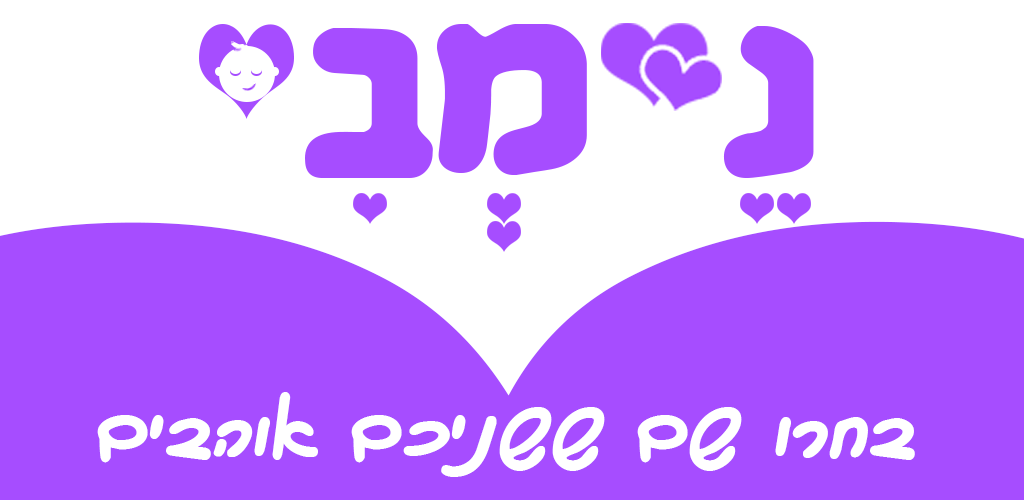
<style>
.page{position:relative;width:1024px;height:500px;background:#a64dff}
.page>*{position:absolute;margin:0}
.t1{font:80px "BN-Sharon-New";color:#ffffff}
</style>
<div class="page">
<p class="t1" style="left:97px;top:392px;width:818px;height:85px">םיבהוא םכינשש םש ורחב</p>
</div>
